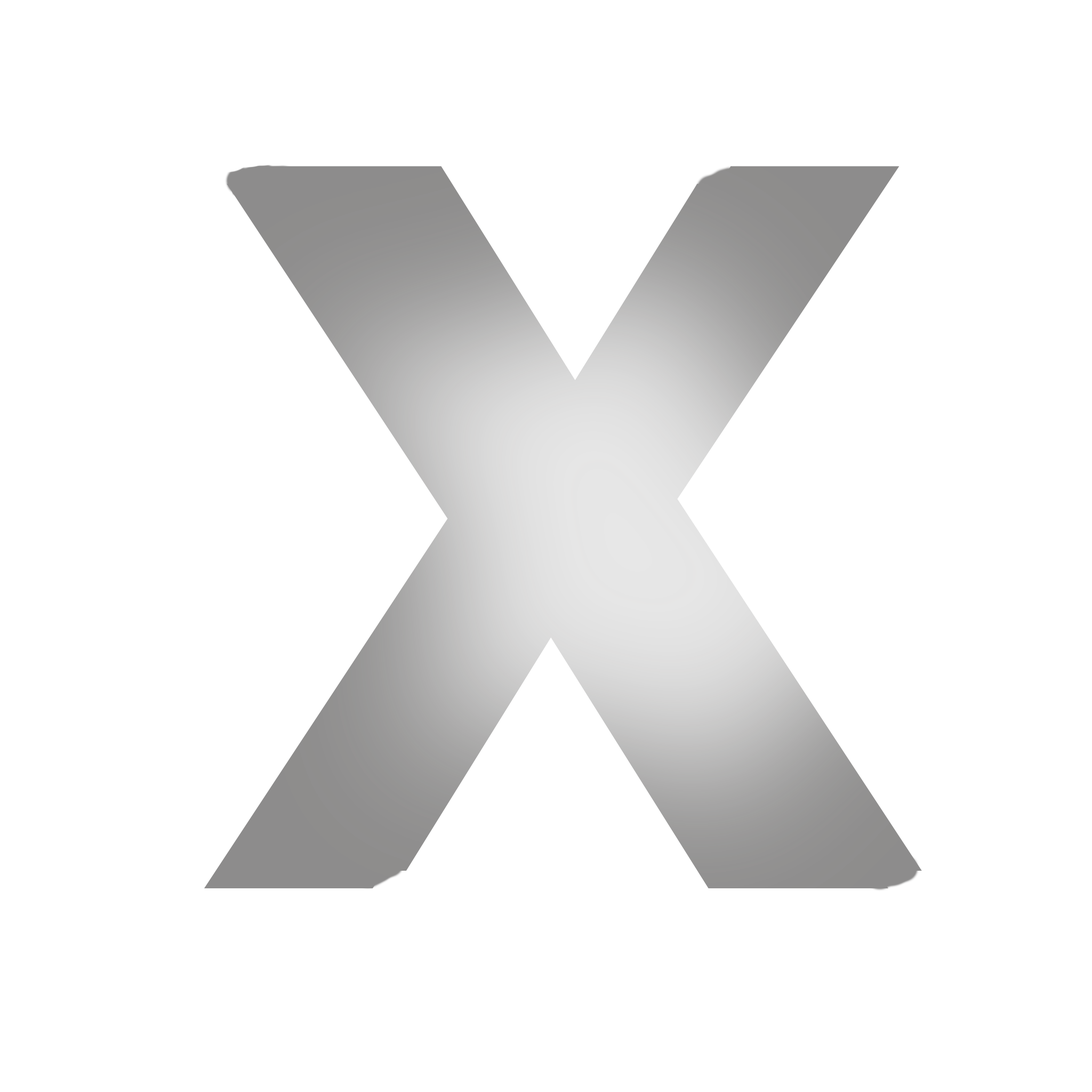
<style>
.page{position:relative;width:1092px;height:1092px;background:#ffffff}
.page>*{position:absolute;margin:0}
.t1{font:1026.7px "Archivo-Bold";letter-spacing:-0.005em}
</style>
<div class="page">
<p class="t1" style="left:204px;top:183px;width:684px;height:705px">X</p>
</div>
